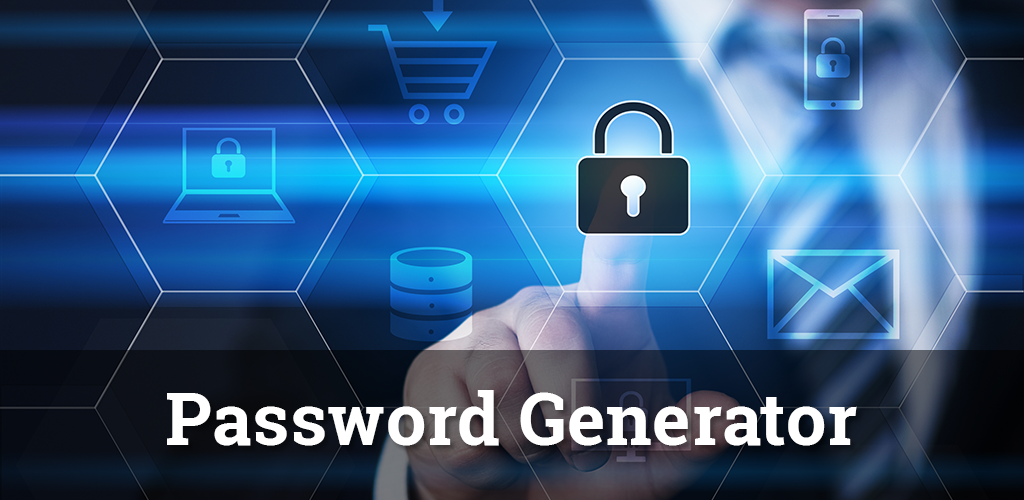
<style>
.page{position:relative;width:1024px;height:500px}
.page>*{position:absolute;margin:0}
.t1{font:72px "RobotoSlab-Bold";letter-spacing:0.01em;color:#ffffff}
</style>
<div class="page">
<p class="t1" style="left:167px;top:390px;width:690px;height:56px">Password Generator</p>
</div>
